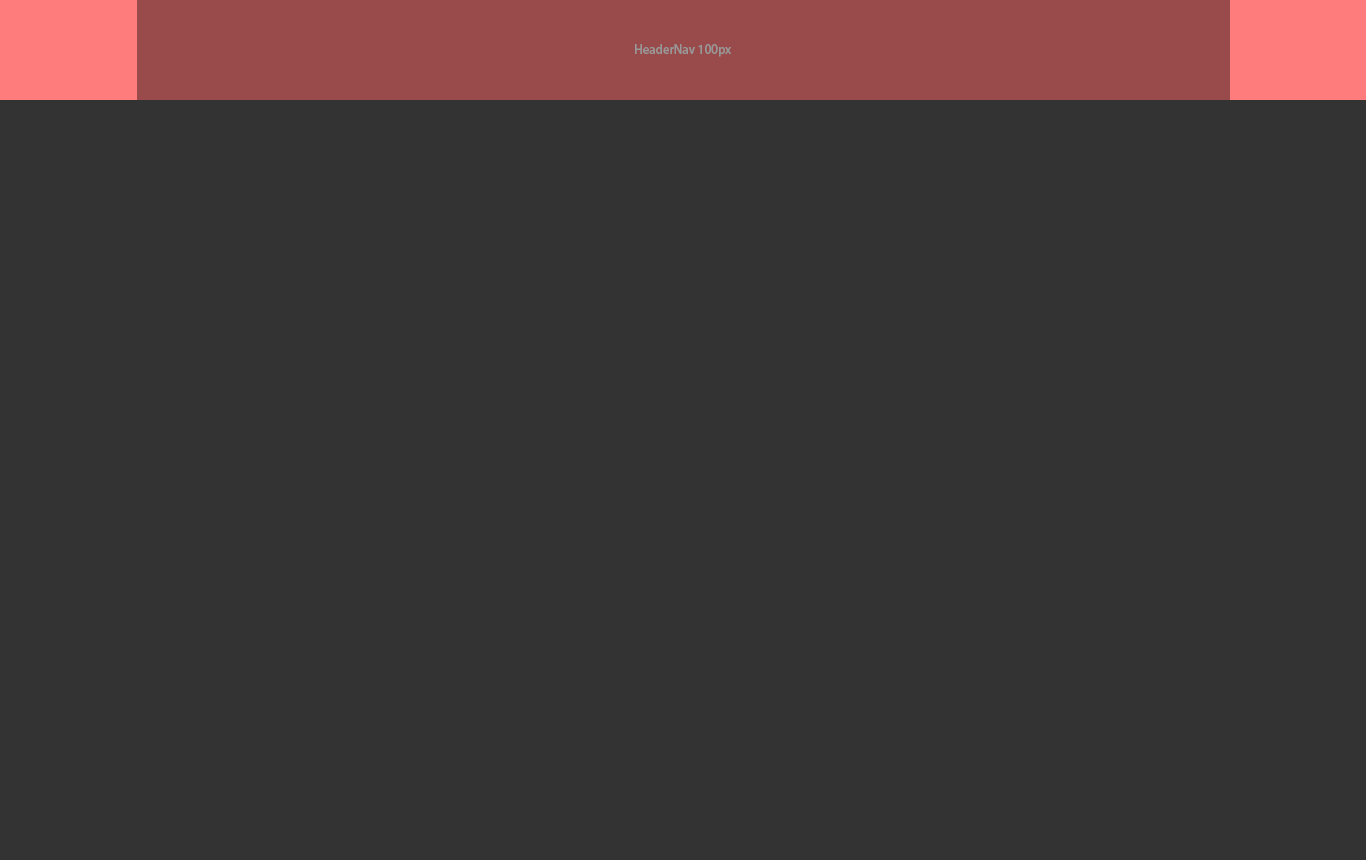
<style>
.page{position:relative;width:1366px;height:860px;background:#333333}
.page>*{position:absolute;margin:0}
.t1{font:12px "AdobeHeitiStd-Regular";color:#999898}
</style>
<div class="page">
<p class="t1" style="left:635px;top:44px;width:96px;height:13px">HeaderNav 100px</p>
</div>
